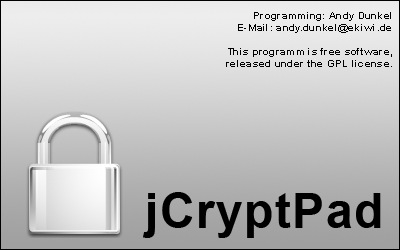
<style>
.page{position:relative;width:400px;height:250px}
.page>*{position:absolute;margin:0}
.t1{font:10px "Arial-BoldMT";letter-spacing:0.03em;color:#000000}
.t2{font:48px "Arial-BoldMT";letter-spacing:0.03em;color:#000000}
</style>
<div class="page">
<p class="t1" style="left:226px;top:12px;width:166px;height:55px;text-align:right">Programming: Andy Dunkel<br>E-Mail: andy.dunkel@ekiwi.de<br><br>This programm is free software,<br>released under the GPL license.</p>
<p class="t2" style="left:143px;top:192px;width:238px;height:46px">jCryptPad</p>
</div>
